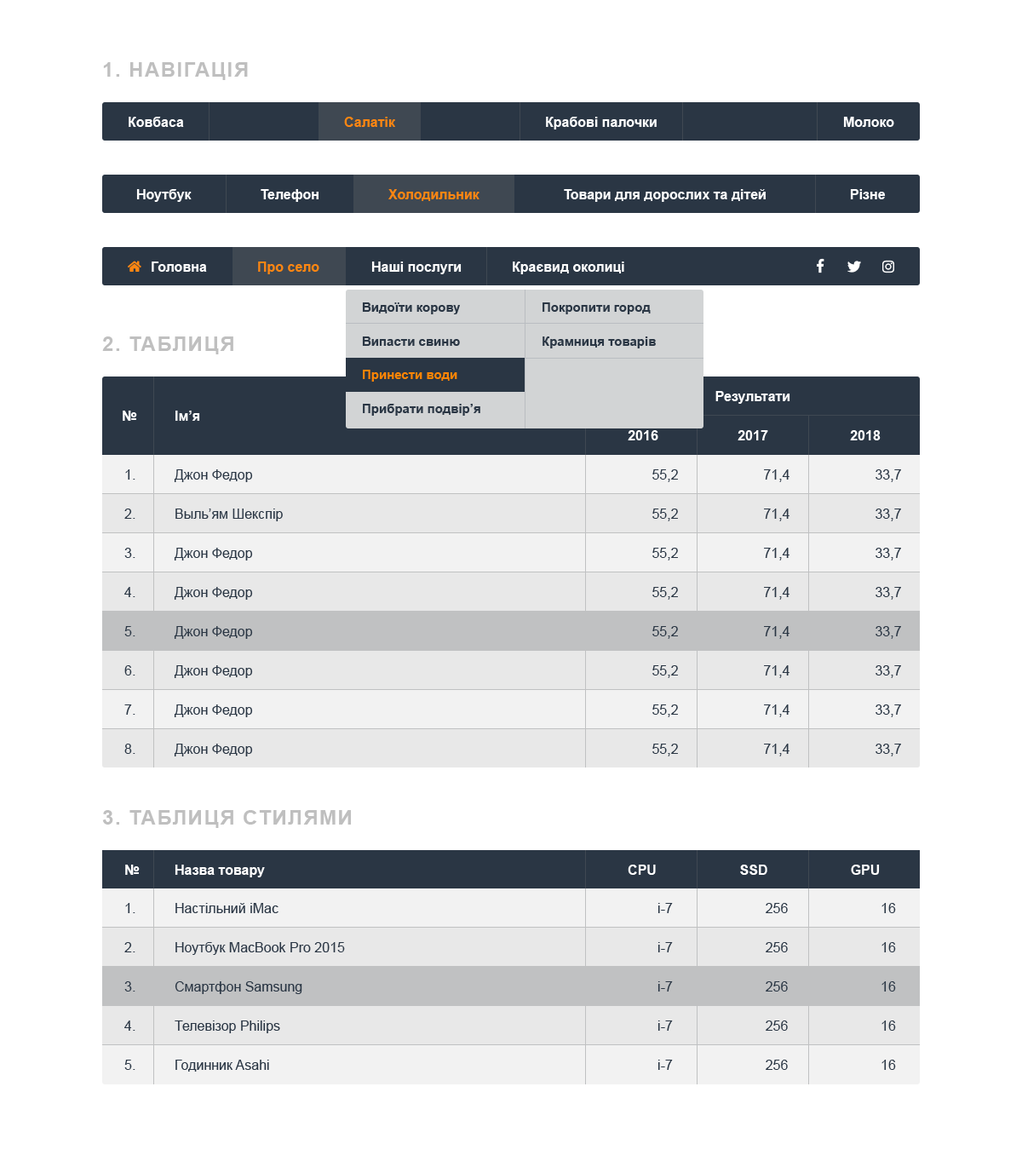
<style>
.page{position:relative;width:1022px;height:1167px;background:#ffffff}
.page>*{position:absolute;margin:0}
.t1{font:20.4px "Arial-BoldMT";letter-spacing:0.06em;color:#bfbfbf;text-transform:uppercase}
.t2{font:13.6px "Arial-BoldMT";color:#ffffff}
.t3{font:13.6px "Arial-BoldMT";color:#fd8612}
.t4{font:12.8px "Arial-BoldMT";color:#2a3644}
.t5{font:12.8px "Arial-BoldMT";color:#ff8505}
.t6{font:13.6px "ArialMT";color:#2a3644}
</style>
<div class="page">
<p class="t1" style="left:103px;top:62px;width:145px;height:18px">1. Навігація</p>
<p class="t2" style="left:129px;top:117px;width:55px;height:10px">Ковбаса</p>
<p class="t3" style="left:344px;top:117px;width:51px;height:10px">Салатік</p>
<p class="t2" style="left:546px;top:117px;width:111px;height:12px">Крабові палочки</p>
<p class="t2" style="left:843px;top:117px;width:51px;height:10px">Молоко</p>
<p class="t2" style="left:136px;top:189px;width:56px;height:13px">Ноутбук</p>
<p class="t2" style="left:261px;top:189px;width:58px;height:13px">Телефон</p>
<p class="t3" style="left:388px;top:189px;width:91px;height:12px">Холодильник</p>
<p class="t2" style="left:564px;top:189px;width:202px;height:13px">Товари для дорослих та дітей</p>
<p class="t2" style="left:850px;top:189px;width:36px;height:10px">Різне</p>
<p class="t2" style="left:152px;top:261px;width:55px;height:11px">Головна</p>
<p class="t3" style="left:258px;top:261px;width:61px;height:13px">Про село</p>
<p class="t2" style="left:371px;top:261px;width:91px;height:13px">Наші послуги</p>
<p class="t2" style="left:513px;top:261px;width:111px;height:13px">Краєвид околиці</p>
<p class="t4" style="left:362px;top:302px;width:98px;height:12px">Видоїти корову</p>
<p class="t4" style="left:543px;top:302px;width:108px;height:12px">Покропити город</p>
<p class="t1" style="left:102px;top:336px;width:131px;height:18px">2. Таблиця</p>
<p class="t4" style="left:362px;top:336px;width:98px;height:10px">Випасти свиню</p>
<p class="t4" style="left:543px;top:336px;width:113px;height:12px">Крамниця товарів</p>
<p class="t5" style="left:363px;top:370px;width:94px;height:12px">Принести води</p>
<p class="t2" style="left:715px;top:391px;width:75px;height:13px">Результати</p>
<p class="t2" style="left:123px;top:410px;width:14px;height:11px">№</p>
<p class="t2" style="left:175px;top:410px;width:25px;height:11px">Ім’я</p>
<p class="t4" style="left:363px;top:404px;width:117px;height:12px">Прибрати подвір’я</p>
<p class="t2" style="left:628px;top:430px;width:30px;height:10px">2016</p>
<p class="t2" style="left:738px;top:430px;width:30px;height:10px">2017</p>
<p class="t2" style="left:850px;top:430px;width:31px;height:10px">2018</p>
<p class="t6" style="left:125px;top:469px;width:10px;height:10px">1.</p>
<p class="t6" style="left:174px;top:469px;width:79px;height:13px">Джон Федор</p>
<p class="t6" style="left:652px;top:469px;width:26px;height:13px">55,2</p>
<p class="t6" style="left:764px;top:469px;width:25px;height:13px">71,4</p>
<p class="t6" style="left:876px;top:469px;width:25px;height:13px">33,7</p>
<p class="t6" style="left:124px;top:508px;width:11px;height:11px">2.</p>
<p class="t6" style="left:175px;top:508px;width:108px;height:13px">Выль’ям Шекспір</p>
<p class="t6" style="left:652px;top:508px;width:26px;height:13px">55,2</p>
<p class="t6" style="left:764px;top:508px;width:25px;height:13px">71,4</p>
<p class="t6" style="left:876px;top:508px;width:25px;height:13px">33,7</p>
<p class="t6" style="left:124px;top:548px;width:11px;height:10px">3.</p>
<p class="t6" style="left:174px;top:548px;width:79px;height:12px">Джон Федор</p>
<p class="t6" style="left:652px;top:548px;width:26px;height:12px">55,2</p>
<p class="t6" style="left:764px;top:548px;width:25px;height:12px">71,4</p>
<p class="t6" style="left:876px;top:548px;width:25px;height:12px">33,7</p>
<p class="t6" style="left:124px;top:587px;width:11px;height:10px">4.</p>
<p class="t6" style="left:174px;top:587px;width:79px;height:13px">Джон Федор</p>
<p class="t6" style="left:652px;top:587px;width:26px;height:13px">55,2</p>
<p class="t6" style="left:764px;top:587px;width:25px;height:13px">71,4</p>
<p class="t6" style="left:876px;top:587px;width:25px;height:13px">33,7</p>
<p class="t6" style="left:124px;top:626px;width:11px;height:10px">5.</p>
<p class="t6" style="left:174px;top:626px;width:79px;height:13px">Джон Федор</p>
<p class="t6" style="left:652px;top:626px;width:26px;height:13px">55,2</p>
<p class="t6" style="left:764px;top:626px;width:25px;height:13px">71,4</p>
<p class="t6" style="left:876px;top:626px;width:25px;height:13px">33,7</p>
<p class="t6" style="left:124px;top:665px;width:11px;height:10px">6.</p>
<p class="t6" style="left:174px;top:665px;width:79px;height:13px">Джон Федор</p>
<p class="t6" style="left:652px;top:665px;width:26px;height:13px">55,2</p>
<p class="t6" style="left:764px;top:665px;width:25px;height:13px">71,4</p>
<p class="t6" style="left:876px;top:665px;width:25px;height:13px">33,7</p>
<p class="t6" style="left:124px;top:704px;width:11px;height:11px">7.</p>
<p class="t6" style="left:174px;top:704px;width:79px;height:13px">Джон Федор</p>
<p class="t6" style="left:652px;top:704px;width:26px;height:13px">55,2</p>
<p class="t6" style="left:764px;top:704px;width:25px;height:13px">71,4</p>
<p class="t6" style="left:876px;top:704px;width:25px;height:13px">33,7</p>
<p class="t6" style="left:124px;top:743px;width:11px;height:11px">8.</p>
<p class="t6" style="left:174px;top:743px;width:79px;height:13px">Джон Федор</p>
<p class="t6" style="left:652px;top:743px;width:26px;height:13px">55,2</p>
<p class="t6" style="left:764px;top:743px;width:25px;height:13px">71,4</p>
<p class="t6" style="left:876px;top:743px;width:25px;height:13px">33,7</p>
<p class="t1" style="left:102px;top:810px;width:249px;height:18px">3. Таблиця стилями</p>
<p class="t2" style="left:125px;top:864px;width:15px;height:11px">№</p>
<p class="t2" style="left:175px;top:864px;width:90px;height:13px">Назва товару</p>
<p class="t2" style="left:628px;top:864px;width:28px;height:11px">CPU</p>
<p class="t2" style="left:740px;top:864px;width:27px;height:11px">SSD</p>
<p class="t2" style="left:851px;top:864px;width:29px;height:11px">GPU</p>
<p class="t6" style="left:125px;top:903px;width:10px;height:10px">1.</p>
<p class="t6" style="left:175px;top:903px;width:103px;height:10px">Настільний iMac</p>
<p class="t6" style="left:657px;top:903px;width:16px;height:10px">i-7</p>
<p class="t6" style="left:766px;top:903px;width:22px;height:10px">256</p>
<p class="t6" style="left:881px;top:903px;width:15px;height:10px">16</p>
<p class="t6" style="left:124px;top:942px;width:11px;height:10px">2.</p>
<p class="t6" style="left:175px;top:942px;width:170px;height:13px">Ноутбук MacBook Pro 2015</p>
<p class="t6" style="left:657px;top:942px;width:16px;height:10px">i-7</p>
<p class="t6" style="left:766px;top:942px;width:22px;height:10px">256</p>
<p class="t6" style="left:881px;top:942px;width:15px;height:10px">16</p>
<p class="t6" style="left:124px;top:981px;width:11px;height:10px">3.</p>
<p class="t6" style="left:175px;top:981px;width:127px;height:13px">Смартфон Samsung</p>
<p class="t6" style="left:657px;top:981px;width:16px;height:10px">i-7</p>
<p class="t6" style="left:766px;top:981px;width:22px;height:10px">256</p>
<p class="t6" style="left:881px;top:981px;width:15px;height:10px">16</p>
<p class="t6" style="left:124px;top:1020px;width:11px;height:11px">4.</p>
<p class="t6" style="left:175px;top:1020px;width:105px;height:13px">Телевізор Philips</p>
<p class="t6" style="left:657px;top:1020px;width:16px;height:11px">i-7</p>
<p class="t6" style="left:766px;top:1020px;width:22px;height:11px">256</p>
<p class="t6" style="left:881px;top:1020px;width:15px;height:11px">16</p>
<p class="t6" style="left:124px;top:1059px;width:11px;height:11px">5.</p>
<p class="t6" style="left:175px;top:1059px;width:94px;height:12px">Годинник Asahi</p>
<p class="t6" style="left:657px;top:1059px;width:16px;height:11px">i-7</p>
<p class="t6" style="left:766px;top:1059px;width:22px;height:11px">256</p>
<p class="t6" style="left:881px;top:1059px;width:15px;height:11px">16</p>
</div>
